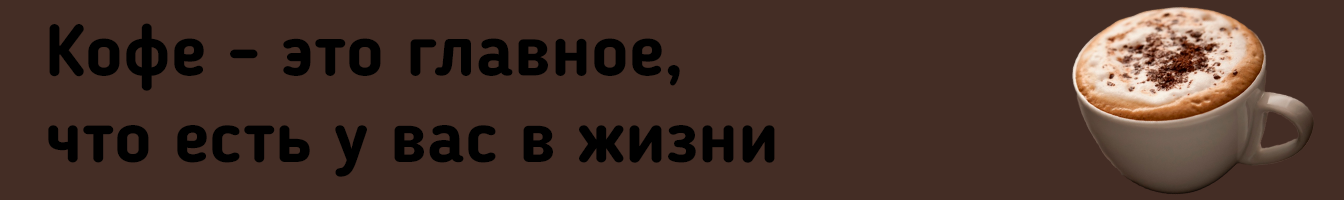
<style>
.page{position:relative;width:1344px;height:200px;background:#442d25}
.page>*{position:absolute;margin:0}
.t1{font:72px "BloggerSans-Bold";color:#000000}
</style>
<div class="page">
<p class="t1" style="left:48px;top:23px;width:727px;height:154px">Кофе - это главное,<br>что есть у вас в жизни</p>
</div>
